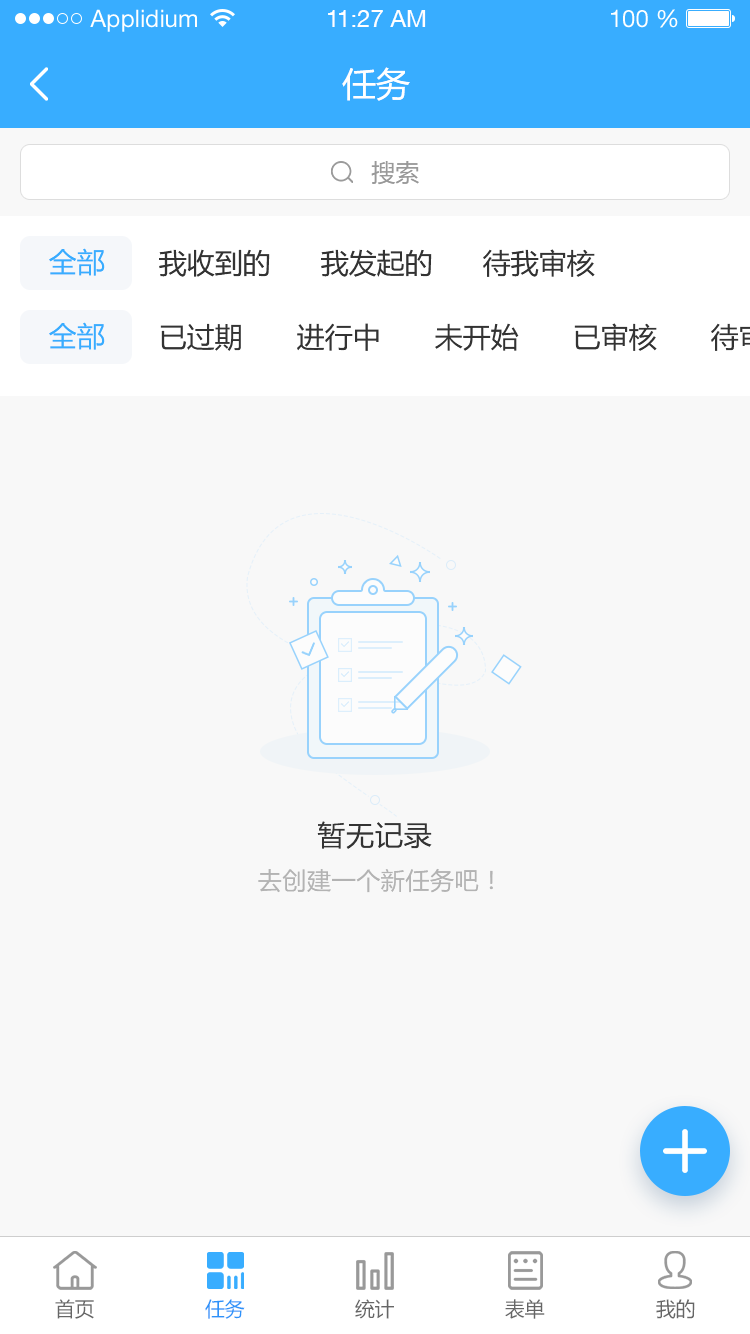
<style>
.page{position:relative;width:750px;height:1334px;background:#f8f8f8}
.page>*{position:absolute;margin:0}
.t1{font:24px "HelveticaNeueLTStd-Roman";color:#ffffff}
.t2{font:24px "HelveticaNeueCE-Roman";color:#ffffff}
.t3{font:34px "MicrosoftYaHei";color:#ffffff}
.t4{font:24px "MicrosoftYaHei";color:#999999}
.t5{font:28px "MicrosoftYaHei";color:#38adff}
.t6{font:28px "MicrosoftYaHei";color:#333333}
.t7{font:28px "MicrosoftYaHei";letter-spacing:0.025em;color:#333333}
.t8{font:24px "MicrosoftYaHei";letter-spacing:0.025em;color:#b3b3b3}
.t9{font:20px "MicrosoftYaHei";color:#666666;text-transform:uppercase}
.t10{font:20px "MicrosoftYaHei";color:#2d93f9;text-transform:uppercase}
</style>
<div class="page">
<p class="t1" style="left:90px;top:9px;width:107px;height:23px">Applidium</p>
<p class="t2" style="left:328px;top:10px;width:98px;height:17px">11:27 AM</p>
<p class="t1" style="left:611px;top:9px;width:67px;height:19px">100 %</p>
<p class="t3" style="left:342px;top:67px;width:68px;height:34px">任务</p>
<p class="t4" style="left:371px;top:161px;width:48px;height:24px">搜索</p>
<p class="t5" style="left:49px;top:248px;width:56px;height:28px">全部</p>
<p class="t6" style="left:159px;top:249px;width:111px;height:28px">我收到的</p>
<p class="t6" style="left:321px;top:249px;width:111px;height:28px">我发起的</p>
<p class="t6" style="left:483px;top:249px;width:112px;height:28px">待我审核</p>
<p class="t5" style="left:49px;top:322px;width:56px;height:28px">全部</p>
<p class="t6" style="left:160px;top:323px;width:81px;height:28px">已过期</p>
<p class="t6" style="left:297px;top:323px;width:82px;height:28px">进行中</p>
<p class="t6" style="left:435px;top:323px;width:84px;height:28px">未开始</p>
<p class="t6" style="left:574px;top:323px;width:83px;height:28px">已审核</p>
<p class="t7" style="left:317px;top:821px;width:115px;height:28px">暂无记录</p>
<p class="t8" style="left:258px;top:868px;width:235px;height:25px">去创建一个新任务吧！</p>
<p class="t9" style="left:55px;top:1299px;width:39px;height:20px">首页</p>
<p class="t10" style="left:205px;top:1299px;width:40px;height:20px">任务</p>
<p class="t9" style="left:355px;top:1299px;width:39px;height:20px">统计</p>
<p class="t9" style="left:505px;top:1299px;width:40px;height:20px">表单</p>
<p class="t9" style="left:656px;top:1299px;width:39px;height:20px">我的</p>
</div>
